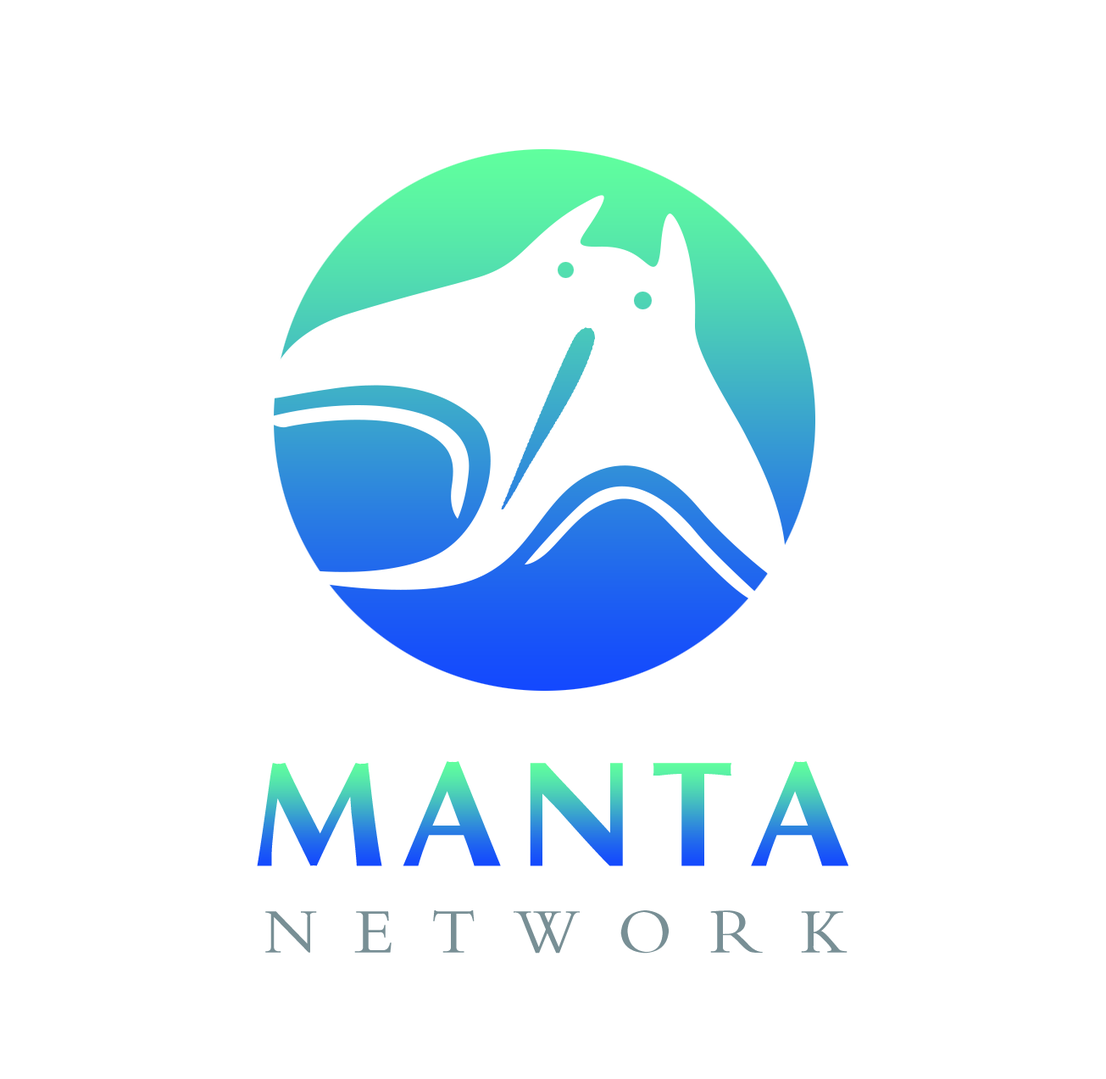
<style>
.page{position:relative;width:1106px;height:1079px;background:#ffffff}
.page>*{position:absolute;margin:0}
.t1{font:150.9px "FZKANGJW--GB1-0";letter-spacing:0.1em}
.t2{font:66.3px "FZBWKSJW--GB1-0";letter-spacing:0.56em;color:#788f95;text-transform:uppercase}
</style>
<div class="page">
<p class="t1" style="left:257px;top:761px;width:591px;height:105px">MANTA</p>
<p class="t2" style="left:265px;top:910px;width:582px;height:43px">NETWORK</p>
</div>
